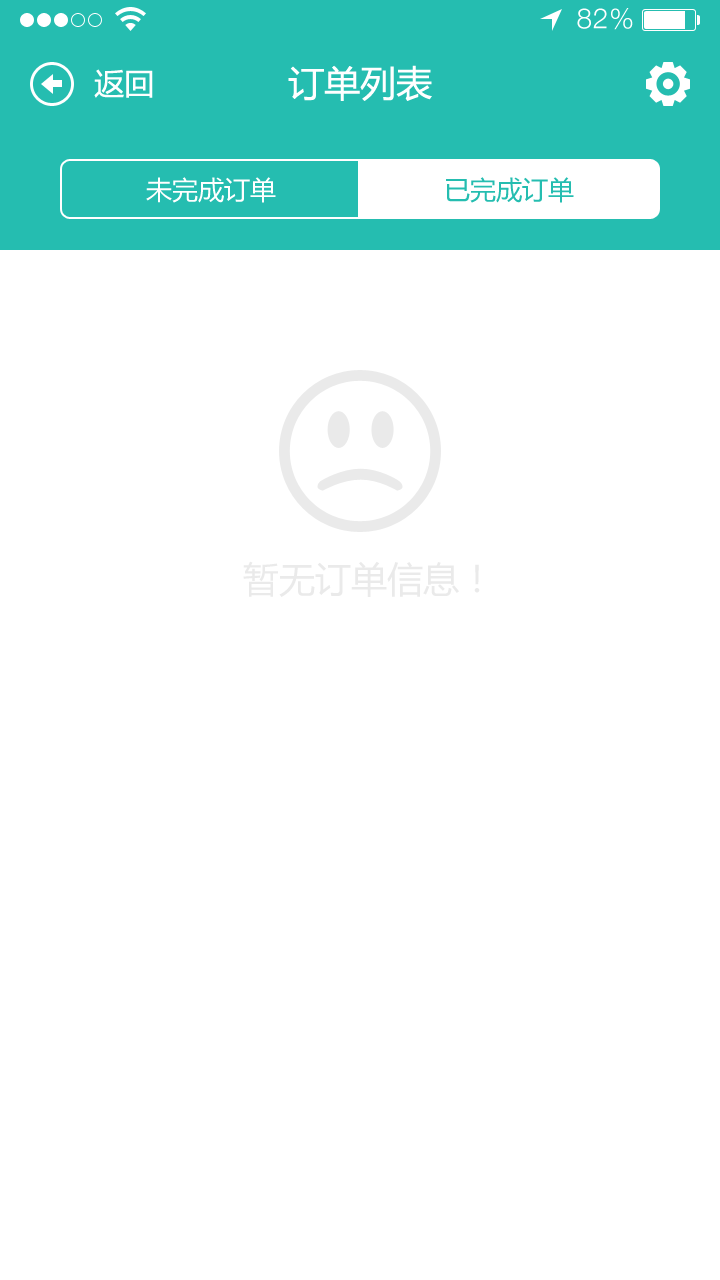
<style>
.page{position:relative;width:720px;height:1280px;background:#ffffff}
.page>*{position:absolute;margin:0}
.t1{font:28px "HelveticaNeue-Light";letter-spacing:0.025em;color:#ffffff}
.t2{font:36px "MicrosoftYaHei";color:#ffffff}
.t3{font:30px "MicrosoftYaHei";color:#ffffff}
.t4{font:26px "MicrosoftYaHei";color:#ffffff}
.t5{font:26px "MicrosoftYaHei";color:#25bdb0}
.t6{font:36px "MicrosoftYaHei";color:#eaeaea}
</style>
<div class="page">
<p class="t1" style="left:577px;top:8px;width:56px;height:22px">82%</p>
<p class="t2" style="left:288px;top:65px;width:144px;height:36px">订单列表</p>
<p class="t3" style="left:94px;top:69px;width:59px;height:29px">返回</p>
<p class="t4" style="left:146px;top:177px;width:130px;height:26px">未完成订单</p>
<p class="t5" style="left:446px;top:177px;width:128px;height:26px">已完成订单</p>
<p class="t6" style="left:243px;top:561px;width:237px;height:36px">暂无订单信息！</p>
</div>
